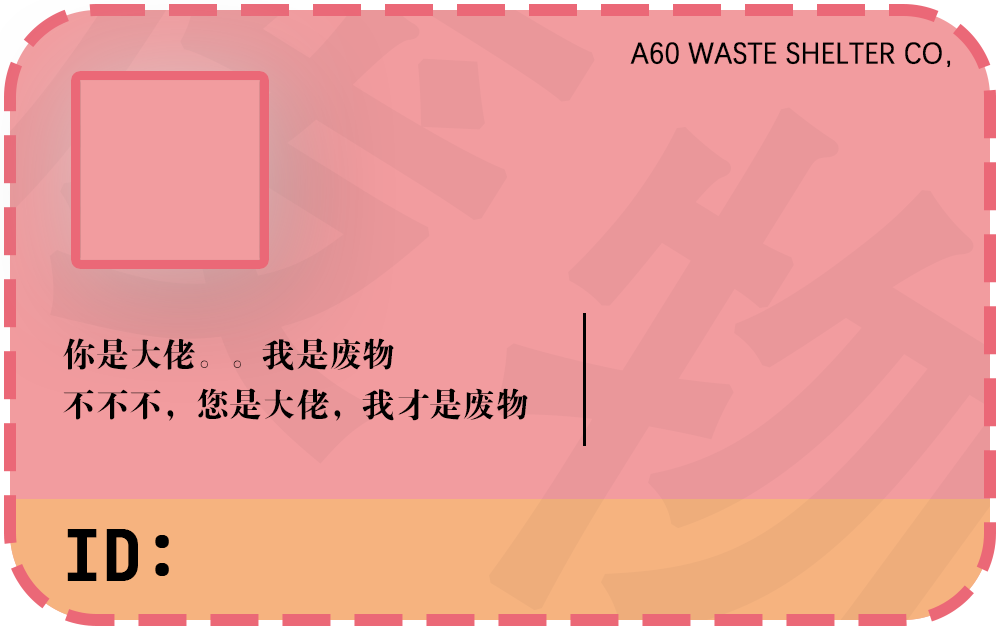
<style>
.page{position:relative;width:1000px;height:630px;background:#f29c9f}
.page>*{position:absolute;margin:0}
.t1{font:30px "DengXian";color:#000000;text-transform:uppercase;font-weight:bold;scale:0.92 1}
.t2{font:33.3px/50px "FZDBSJW--GB1-0";color:#000000;text-transform:uppercase}
.t3{font:68.7px "JetBrainsMono-Bold";color:#000000;text-transform:uppercase;font-weight:bold;scale:0.93 1}
</style>
<div class="page">
<p class="t1" style="left:630px;top:42px;width:321px;height:26px">A60 Waste shelter CO，</p>
<p class="t2" style="left:63px;top:338px;width:465px;height:83px">你是大佬。。我是废物<br>不不不，您是大佬，我才是废物</p>
<p class="t3" style="left:67px;top:529px;width:102px;height:52px">ID:</p>
</div>
